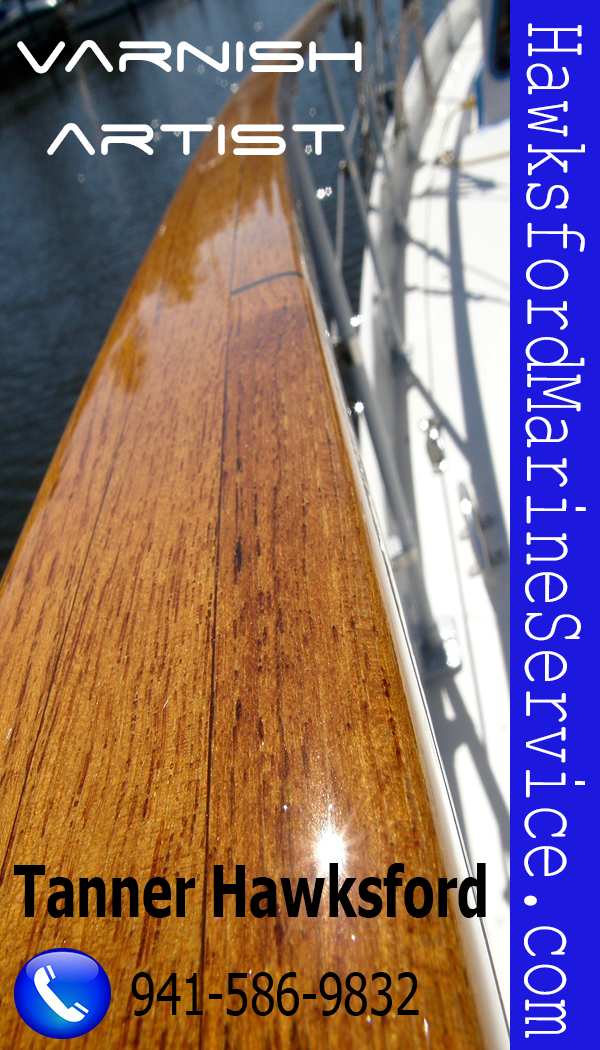
<style>
.page{position:relative;width:600px;height:1050px}
.page>*{position:absolute;margin:0}
.t1{font:93.2px "CourierNewPSMT";color:#ffffff;scale:0.7 1}
.t2{font:69.8px "SpaceAge";color:#ffffff;scale:0.95 1}
.t3{font:70.8px "Tahoma-Bold";color:#000000;scale:0.73 1}
.t4{font:58.3px "Tahoma";color:#000000;scale:0.8 1}
</style>
<div class="page">
<p class="t1" style="left:524px;top:23px;width:62px;height:1015px;rotate:90deg">HawksfordMarineService.com</p>
<p class="t2" style="left:17px;top:40px;width:345px;height:115px">Varnish <br> artist</p>
<p class="t3" style="left:14px;top:863px;width:472px;height:55px">Tanner Hawksford</p>
<p class="t4" style="left:131px;top:972px;width:288px;height:44px">941-586-9832</p>
</div>
